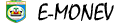
<style>
.page{position:relative;width:118px;height:23px;background:#ffffff}
.page>*{position:absolute;margin:0}
.t1{font:24px "Mistral";color:#000000}
</style>
<div class="page">
<p class="t1" style="left:38px;top:2px;width:76px;height:19px">E-MONEV</p>
</div>
